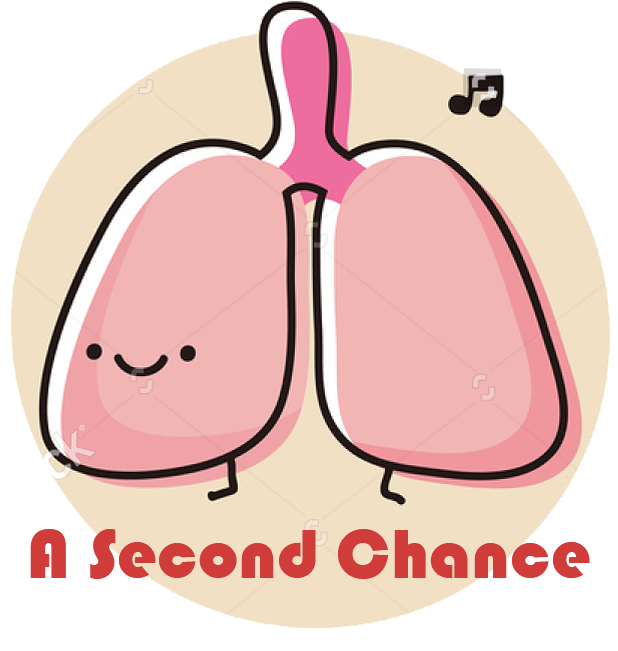
<style>
.page{position:relative;width:618px;height:651px;background:#ffffff}
.page>*{position:absolute;margin:0}
.t1{font:72px "Bauhaus93";color:#d03c3a}
</style>
<div class="page">
<p class="t1" style="left:30px;top:529px;width:560px;height:50px">A Second Chance</p>
</div>
